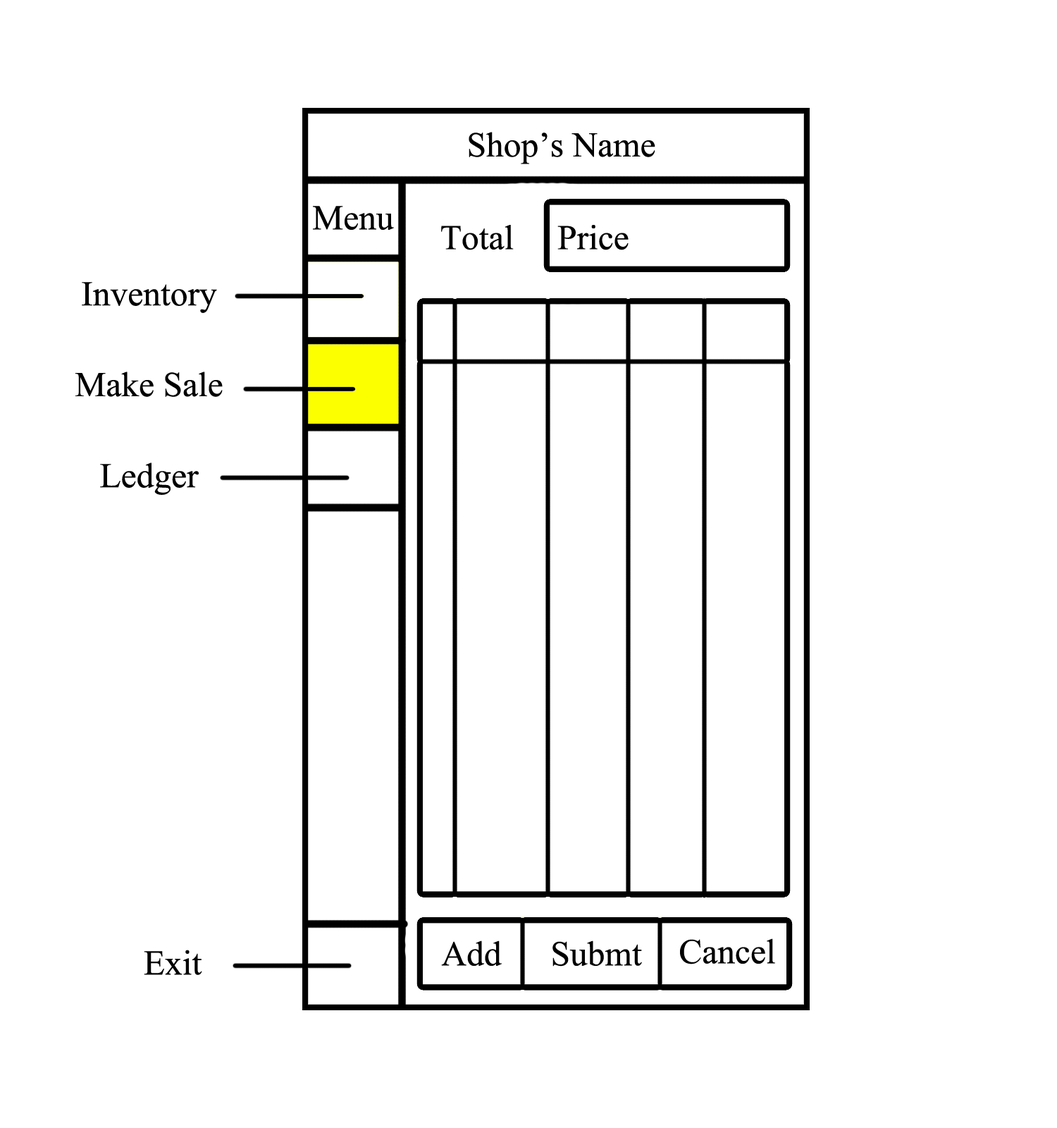
<style>
.page{position:relative;width:1057px;height:1128px;background:#ffffff}
.page>*{position:absolute;margin:0}
.t1{font:52.9px "AngsanaNew";color:#000000}
</style>
<div class="page">
<p class="t1" style="left:469px;top:132px;width:187px;height:32px">Shop’s Name</p>
<p class="t1" style="left:313px;top:206px;width:81px;height:24px">Menu</p>
<p class="t1" style="left:441px;top:225px;width:188px;height:25px">Total     Price</p>
<p class="t1" style="left:82px;top:282px;width:135px;height:31px">Inventory</p>
<p class="t1" style="left:75px;top:371px;width:148px;height:26px">Make Sale</p>
<p class="t1" style="left:100px;top:462px;width:99px;height:33px">Ledger</p>
<p class="t1" style="left:441px;top:940px;width:61px;height:26px">Add</p>
<p class="t1" style="left:553px;top:940px;width:89px;height:26px">Submt</p>
<p class="t1" style="left:680px;top:938px;width:95px;height:26px">Cancel</p>
<p class="t1" style="left:144px;top:949px;width:58px;height:26px">Exit</p>
</div>
